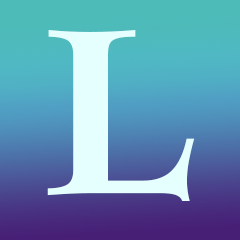
<style>
.page{position:relative;width:240px;height:240px}
.page>*{position:absolute;margin:0}
.t1{font:220.1px "HeirofLightBold";color:#e4fffe;scale:1.21 1}
</style>
<div class="page">
<p class="t1" style="left:47px;top:30px;width:148px;height:171px">L</p>
</div>
